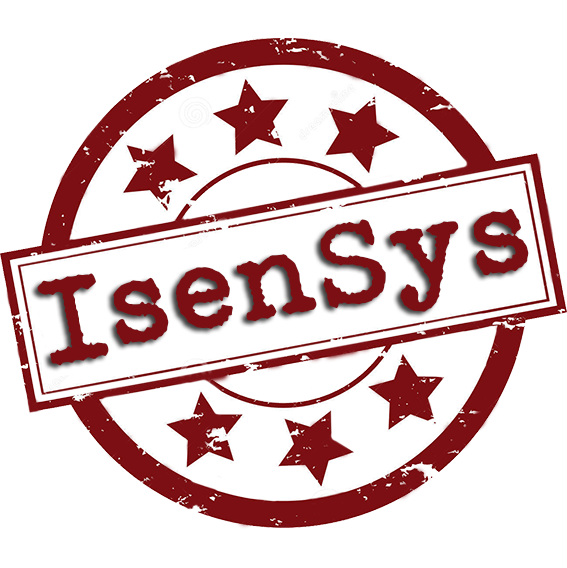
<style>
.page{position:relative;width:567px;height:568px;background:#ffffff}
.page>*{position:absolute;margin:0}
.t1{font:120px "Bohemian-typewriter";color:#7c0f14}
</style>
<div class="page">
<p class="t1" style="left:37px;top:208px;width:492px;height:158px;rotate:-11deg">IsenSys</p>
</div>
